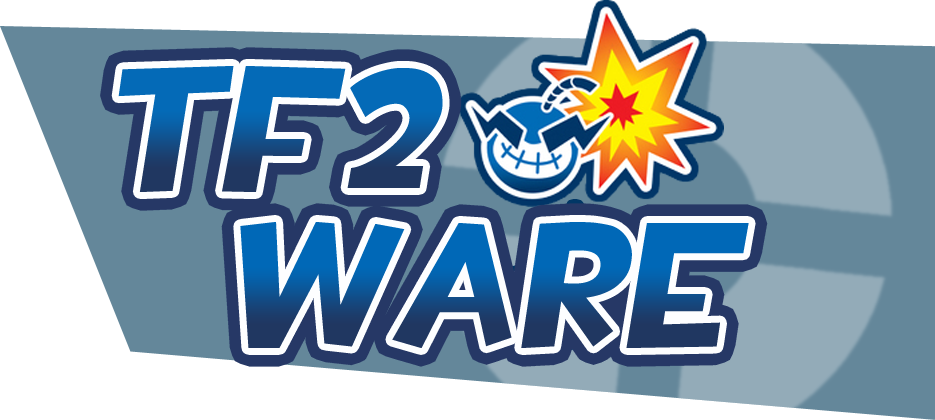
<style>
.page{position:relative;width:935px;height:420px;background:#ffffff}
.page>*{position:absolute;margin:0}
.t1{font:179px "TF2Build";font-style:italic}
</style>
<div class="page">
<p class="t1" style="left:118px;top:66px;width:325px;height:126px">TF2</p>
<p class="t1" style="left:240px;top:222px;width:509px;height:126px">WARE</p>
</div>
